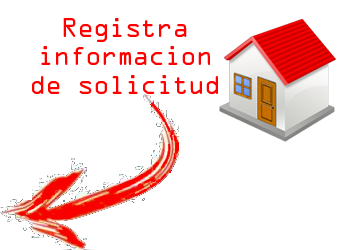
<style>
.page{position:relative;width:350px;height:250px;background:#ffffff}
.page>*{position:absolute;margin:0}
.t1{font:24px "OCRAStd";letter-spacing:-0.06em;color:#ff0000}
</style>
<div class="page">
<p class="t1" style="left:32px;top:18px;width:186px;height:76px;text-align:center">Registra<br>informacion<br>de solicitud</p>
</div>
